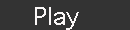
<style>
.page{position:relative;width:130px;height:30px;background:#333333}
.page>*{position:absolute;margin:0}
.t1{font:24px "Geneva";color:#faf7f7}
</style>
<div class="page">
<p class="t1" style="left:35px;top:7px;width:44px;height:23px">Play</p>
</div>
